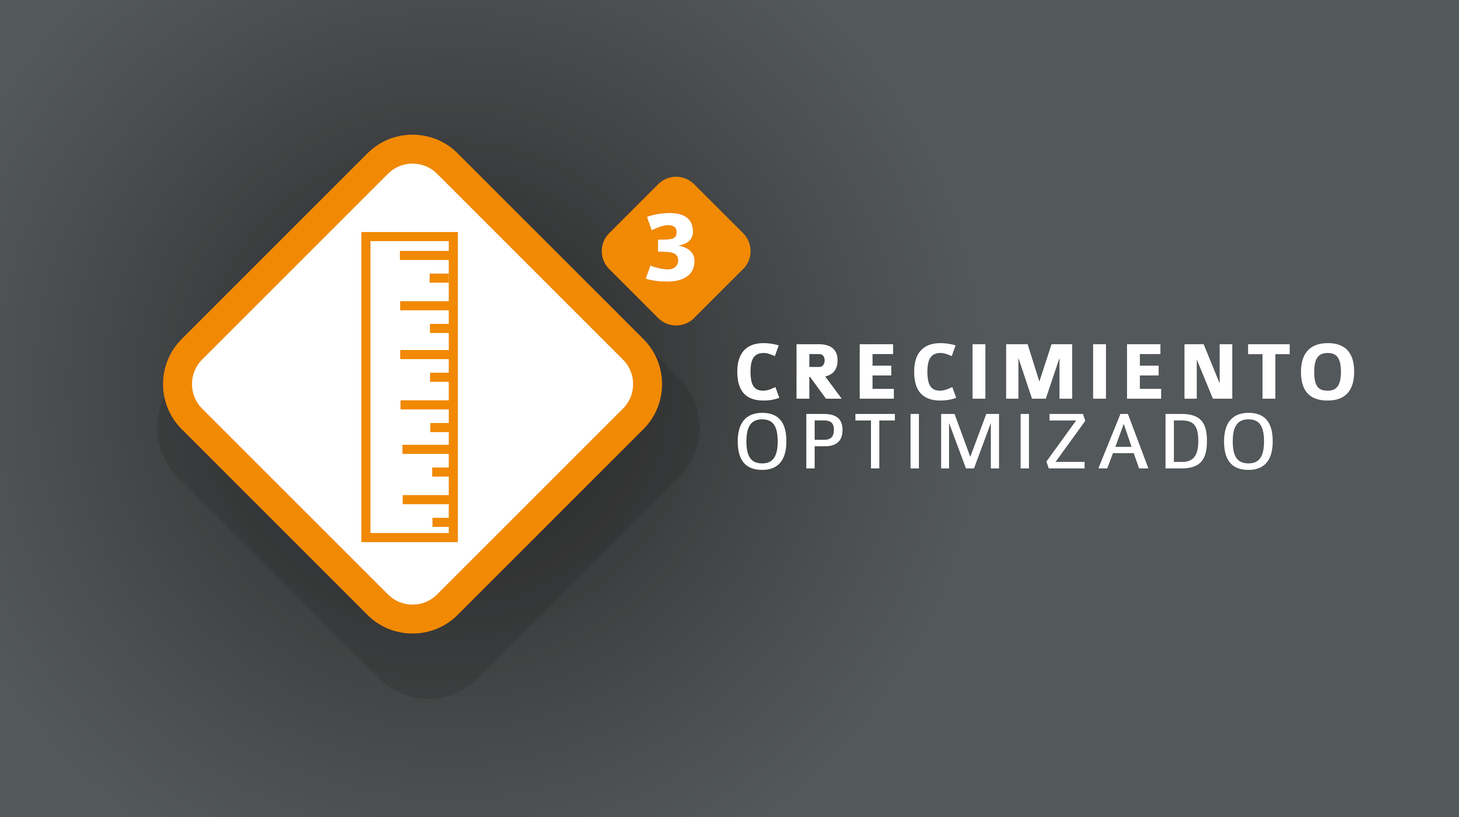
<style>
.page{position:relative;width:1459px;height:817px;background:#53585a}
.page>*{position:absolute;margin:0}
.t1{font:106.8px "Colaborate-Bold";letter-spacing:0.08em;color:#ffffff}
.t2{font:84px/70px "Colaborate-Bold";letter-spacing:0.08em;color:#ffffff}
.t3{font:22.6px/70px "Colaborate-Light";letter-spacing:0.08em;color:#ffffff}
.t4{font:84px/70px "Colaborate-Regular";letter-spacing:0.08em;color:#ffffff}
</style>
<div class="page">
<p class="t1" style="left:646px;top:213px;width:48px;height:69px">3</p>
<p class="t2" style="left:737px;top:343px;width:617px;height:127px"><span class="t3"><br></span>CRECIMIENTO<br><span class="t4">OPTIMIZADO</span></p>
</div>
